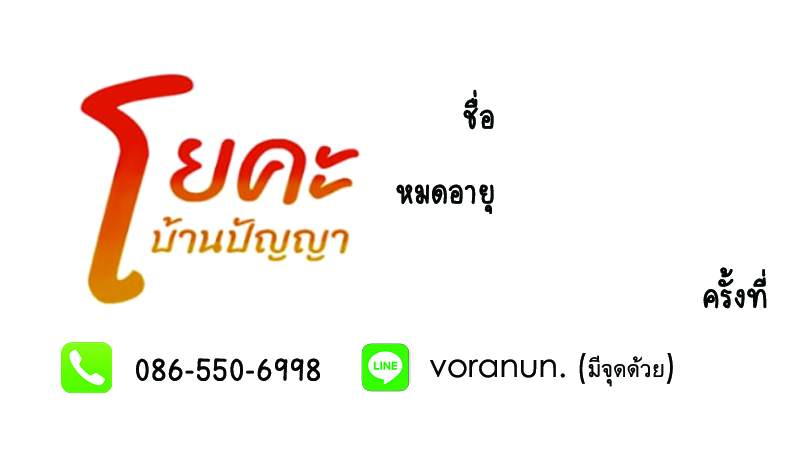
<style>
.page{position:relative;width:792px;height:450px;background:#ffffff}
.page>*{position:absolute;margin:0}
.t1{font:32px "SlimSimMe-Regular";color:#060808}
.t2{font:32px "CenturyGothic";color:#060808}
.t3{font:32px "BrowalliaNew";color:#060808}
</style>
<div class="page">
<p class="t1" style="left:463px;top:89px;width:31px;height:41px">ชื่อ</p>
<p class="t1" style="left:396px;top:184px;width:98px;height:30px">หมดอายุ</p>
<p class="t1" style="left:703px;top:267px;width:64px;height:42px">ครั้งที่</p>
<p class="t2" style="left:430px;top:353px;width:243px;height:34px">voranun. (<span class="t3">มีจุดด้วย</span>)</p>
<p class="t1" style="left:136px;top:358px;width:184px;height:23px">086-550-6998</p>
</div>
